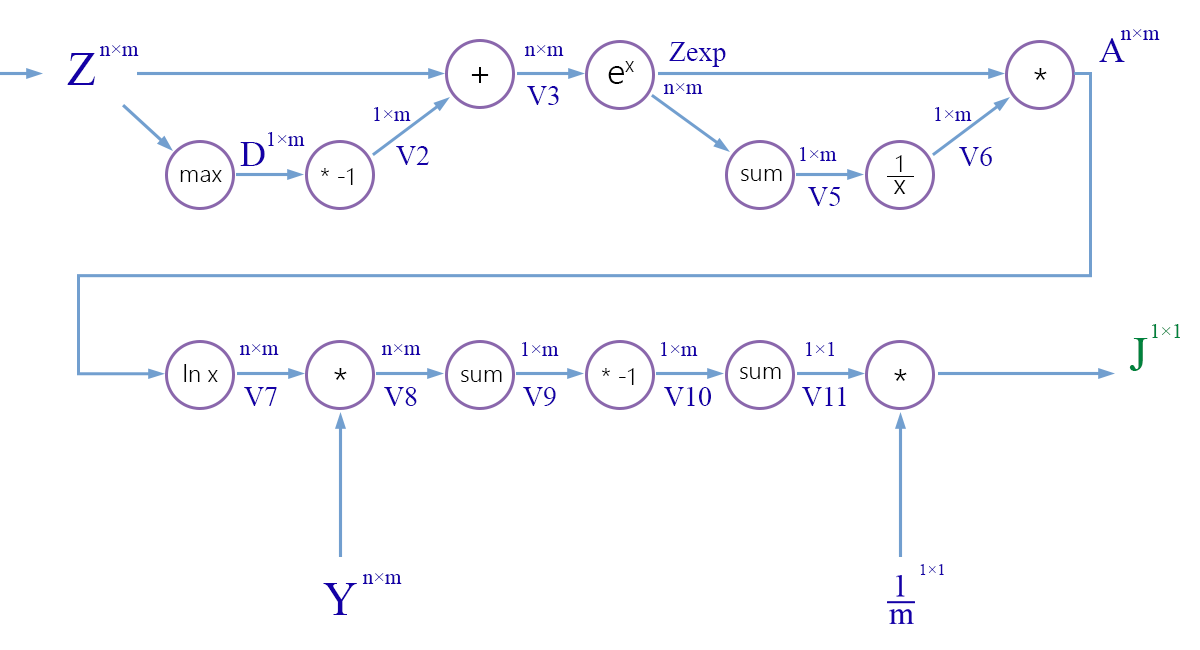
<style>
.page{position:relative;width:1200px;height:650px;background:#ffffff}
.page>*{position:absolute;margin:0}
.t1{font:36px "IskoolaPota";color:#1400a6}
.t2{font:48px "IskoolaPota";color:#1400a6}
.t3{font:28px "IskoolaPota";color:#1400a6}
.t4{font:36px "SegoeUI-Semilight";color:#000000}
.t5{font:24px/21.9px "SegoeUI-Semilight";color:#000000}
.t6{font:28px/21.9px "SegoeUI-Semilight";color:#000000}
.t7{font:24px "SegoeUI-Semilight";color:#000000}
.t8{font:36px "IskoolaPota";color:#00823d}
.t9{font:48px "IskoolaPota";color:#00823d}
.t10{font:30px "IskoolaPota";color:#1400a6}
</style>
<div class="page">
<p class="t1" style="left:1120px;top:29px;width:40px;height:11px">n×m</p>
<p class="t1" style="left:1099px;top:38px;width:26px;height:24px">A</p>
<p class="t2" style="left:67px;top:53px;width:28px;height:32px">Z</p>
<p class="t1" style="left:99px;top:45px;width:40px;height:11px">n×m</p>
<p class="t1" style="left:524px;top:45px;width:40px;height:11px">n×m</p>
<p class="t3" style="left:669px;top:42px;width:57px;height:25px">Zexp</p>
<p class="t4" style="left:608px;top:61px;width:26px;height:23px">ex</p>
<p class="t4" style="left:471px;top:67px;width:18px;height:16px">+</p>
<p class="t4" style="left:1034px;top:68px;width:13px;height:12px">*</p>
<p class="t3" style="left:527px;top:86px;width:32px;height:19px">V3</p>
<p class="t1" style="left:663px;top:83px;width:40px;height:11px">n×m</p>
<p class="t1" style="left:374px;top:107px;width:37px;height:14px">1×m</p>
<p class="t1" style="left:935px;top:107px;width:37px;height:14px">1×m</p>
<p class="t1" style="left:268px;top:132px;width:37px;height:14px">1×m</p>
<p class="t1" style="left:240px;top:142px;width:25px;height:24px">D</p>
<p class="t3" style="left:396px;top:146px;width:33px;height:19px">V2</p>
<p class="t1" style="left:800px;top:147px;width:37px;height:14px">1×m</p>
<p class="t3" style="left:959px;top:147px;width:33px;height:19px">V6</p>
<p class="t5" style="left:894px;top:155px;width:12px;height:39px;text-align:center">1<br><span class="t6">x</span></p>
<p class="t7" style="left:180px;top:170px;width:42px;height:12px">max</p>
<p class="t7" style="left:321px;top:168px;width:32px;height:17px">* -1</p>
<p class="t7" style="left:741px;top:169px;width:41px;height:12px">sum</p>
<p class="t3" style="left:808px;top:187px;width:32px;height:19px">V5</p>
<p class="t8" style="left:1152px;top:324px;width:28px;height:14px">1×1</p>
<p class="t1" style="left:522px;top:342px;width:37px;height:14px">1×m</p>
<p class="t1" style="left:661px;top:342px;width:37px;height:14px">1×m</p>
<p class="t1" style="left:806px;top:342px;width:28px;height:14px">1×1</p>
<p class="t9" style="left:1129px;top:338px;width:19px;height:33px">J</p>
<p class="t1" style="left:239px;top:344px;width:40px;height:11px">n×m</p>
<p class="t1" style="left:381px;top:344px;width:40px;height:11px">n×m</p>
<p class="t7" style="left:184px;top:364px;width:34px;height:18px">ln x</p>
<p class="t4" style="left:334px;top:368px;width:13px;height:12px">*</p>
<p class="t7" style="left:461px;top:370px;width:41px;height:12px">sum</p>
<p class="t7" style="left:602px;top:368px;width:32px;height:17px">* -1</p>
<p class="t7" style="left:740px;top:367px;width:41px;height:12px">sum</p>
<p class="t4" style="left:894px;top:369px;width:13px;height:12px">*</p>
<p class="t3" style="left:244px;top:387px;width:33px;height:19px">V7</p>
<p class="t3" style="left:384px;top:387px;width:33px;height:19px">V8</p>
<p class="t3" style="left:523px;top:387px;width:33px;height:19px">V9</p>
<p class="t3" style="left:664px;top:387px;width:47px;height:19px">V10</p>
<p class="t3" style="left:802px;top:387px;width:44px;height:19px">V11</p>
<p class="t10" style="left:920px;top:564px;width:24px;height:11px">1×1</p>
<p class="t1" style="left:362px;top:573px;width:40px;height:11px">n×m</p>
<p class="t2" style="left:323px;top:583px;width:34px;height:32px">Y</p>
</div>
